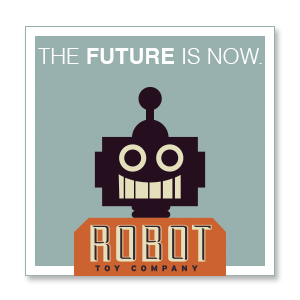
<style>
.page{position:relative;width:300px;height:300px;background:#98b1ae}
.page>*{position:absolute;margin:0}
.t1{font:22px "Helvetica-Light";color:#ffffff}
.t2{font:22px "Helvetica-Bold";color:#ffffff}
</style>
<div class="page">
<p class="t1" style="left:38px;top:48px;width:224px;height:16px">THE <span class="t2">FUTURE</span> IS NOW.</p>
</div>
